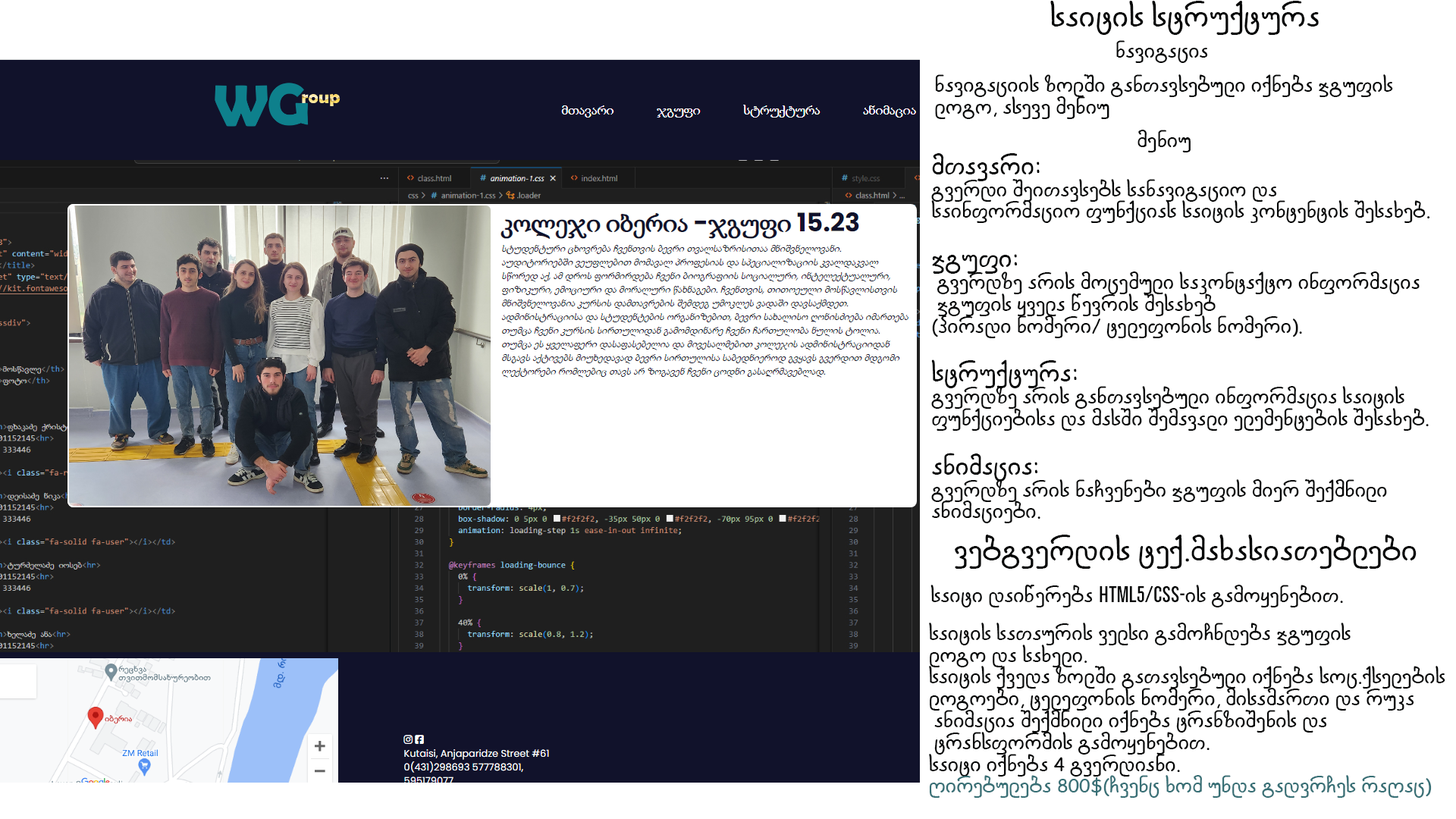
<style>
.page{position:relative;width:1456px;height:819px;background:#ffffff}
.page>*{position:absolute;margin:0}
.t1{font:27.3px "Saba";color:#050606}
.t2{font:18.2px "Saba";color:#050606}
.t3{font:22.7px "Saba";color:#050606}
.t4{font:22.7px "GLKirovi-Bold";color:#050606}
.t5{font:18.2px "Saba";color:#387076}
</style>
<div class="page">
<p class="t1" style="left:1050px;top:1px;width:269px;height:34px">saitis struqtura</p>
<p class="t2" style="left:1116px;top:40px;width:92px;height:23px">navigacia</p>
<p class="t2" style="left:935px;top:74px;width:458px;height:45px">navigaciis zolSi ganTavsebuli iqneba jgufis <br>logo, aseve meniu</p>
<p class="t2" style="left:1137px;top:130px;width:54px;height:22px">meniu</p>
<p class="t2" style="left:931px;top:153px;width:499px;height:370px"><span class="t3">mTavari:<br></span>gverdi SeiTavsebs sanavigacio da<br>sainformacio funqcias saitis kontentis Sesaxeb.<br><br><span class="t3">jgufi:<br></span> gverdze aris mocemuli sakontaqto informacia<br> jgufis yvela wevris Sesaxeb <br>(piradi nomeri/ telefonis nomeri).<br><br><span class="t3">struqtura:<br></span>gverdze aris ganTavsebuli informacia saitis <br>funqciebisa da masSi Semavali elementebis Sesaxeb.<br><br><span class="t3">animacia:<br></span>gverdze aris naCvenebi jgufis mier Seqmnili <br>animaciebi.</p>
<p class="t1" style="left:955px;top:535px;width:462px;height:34px">vebgverdis teq.maxasiaTeblebi</p>
<p class="t2" style="left:930px;top:585px;width:413px;height:22px">saiti daiwereba HHHHH<span class="t4">HTML5/CSS-</span>is gamoyenebiT.</p>
<p class="t2" style="left:929px;top:623px;width:516px;height:175px">saitis saTauris velsi gamoCndeba jgufis <br>logo da saxeli.<br>saitis qveda zolSi gaTavsebuli iqneba soc.qselebis<br>logoebi, telefonis nomeri, misamarTi da ruka<br> animacia Seqmnili iqneba tranziSenis da<br> transformis gamoyenebiT.<br>saiti iqneba 4 gverdiani.<br><span class="t5">Rirebuleba 800$(Cvenc xom unda gadvrCes raRac)</span></p>
</div>
